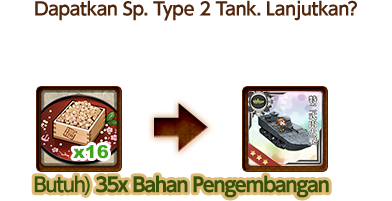
<style>
.page{position:relative;width:392px;height:201px;background:#ffffff}
.page>*{position:absolute;margin:0}
.t1{font:18px "UDShinGoPro-DeBold";letter-spacing:-0.04em;color:#50260d}
.t2{font:20px "UDShinGoPro-Bold";letter-spacing:-0.08em;color:#375309}
.t3{font:20px "UDShinGoPro-DeBold";letter-spacing:-0.08em;color:#375309}
</style>
<div class="page">
<p class="t1" style="left:35px;top:0px;width:322px;height:21px">Dapatkan Sp. Type 2 Tank. Lanjutkan?</p>
<p class="t2" style="left:34px;top:175px;width:295px;height:23px"><span class="t3">Butuh) </span>35x Bahan Pengembangan</p>
</div>
